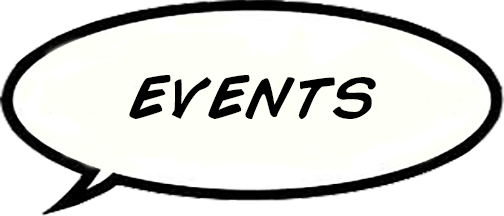
<style>
.page{position:relative;width:504px;height:216px;background:#fefff7}
.page>*{position:absolute;margin:0}
.t1{font:72px "ComicBook-Italic";color:#000000}
</style>
<div class="page">
<p class="t1" style="left:129px;top:75px;width:247px;height:44px">events</p>
</div>
